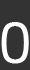
<style>
.page{position:relative;width:30px;height:70px;background:#333333}
.page>*{position:absolute;margin:0}
.t1{font:57px "Exo2-Regular";color:#fefefe}
</style>
<div class="page">
<p class="t1" style="left:1px;top:22px;width:28px;height:42px">0</p>
</div>
